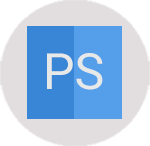
<style>
.page{position:relative;width:150px;height:146px;background:#e2dee0}
.page>*{position:absolute;margin:0}
.t1{font:50px "Roboto-Regular";color:#e7e8e8}
</style>
<div class="page">
<p class="t1" style="left:47px;top:53px;width:56px;height:37px">PS</p>
</div>
